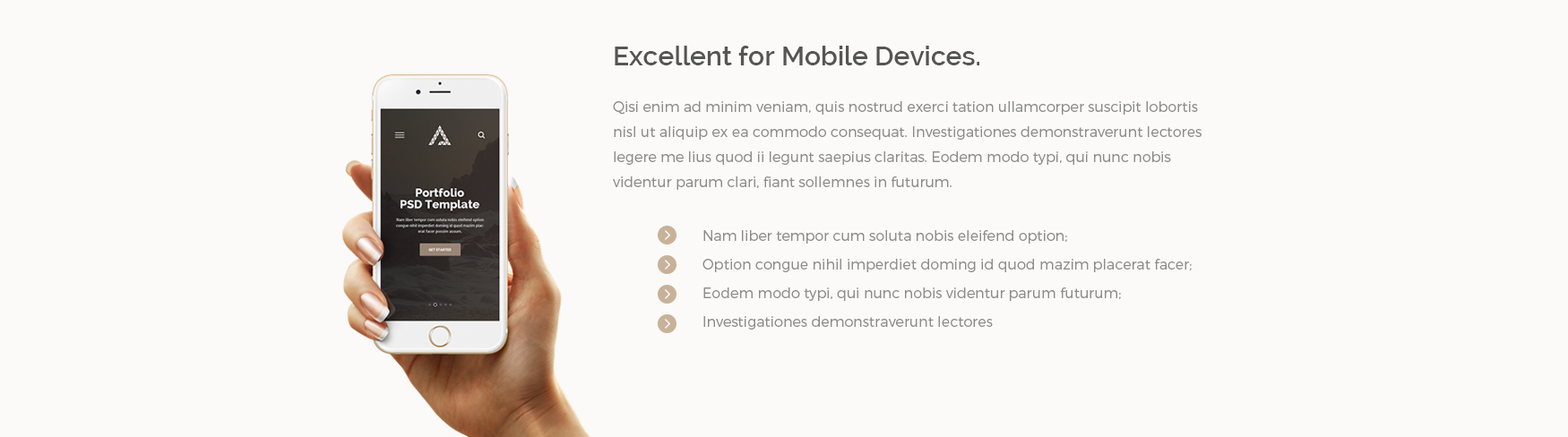
<style>
.page{position:relative;width:1568px;height:437px;background:#fbfaf8}
.page>*{position:absolute;margin:0}
.t1{font:26.9px "Raleway-SemiBold";color:#555555}
.t2{font:14.3px/25.1px "Montserrat-Light";color:#8c8c8c}
.t3{font:14.3px/28.7px "Montserrat-Light";color:#8c8c8c}
</style>
<div class="page">
<p class="t1" style="left:615px;top:46px;width:364px;height:19px">Excellent for Mobile Devices.</p>
<p class="t2" style="left:613px;top:101px;width:589px;height:89px">Qisi enim ad minim veniam, quis nostrud exerci tation ullamcorper suscipit lobortis nisl ut aliquip ex ea commodo consequat. Investigationes demonstraverunt lectores legere me lius quod ii legunt saepius claritas. Eodem modo typi, qui nunc nobis videntur parum clari, fiant sollemnes in futurum.</p>
<p class="t3" style="left:702px;top:230px;width:490px;height:100px">Nam liber tempor cum soluta nobis eleifend option;<br>Option congue nihil imperdiet doming id quod mazim placerat facer;<br>Eodem modo typi, qui nunc nobis videntur parum futurum;<br>Investigationes demonstraverunt lectores</p>
</div>
